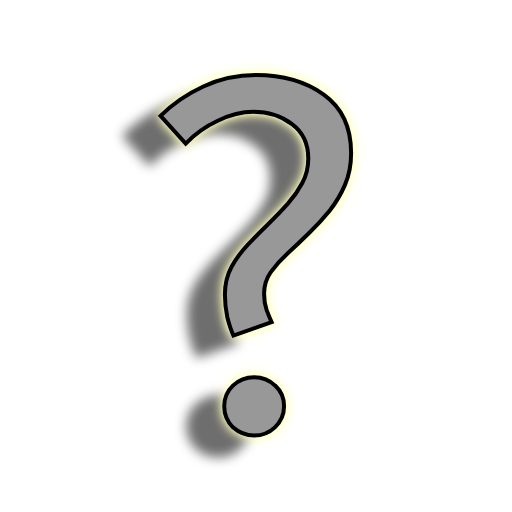
<style>
.page{position:relative;width:512px;height:512px;background:#ffffff}
.page>*{position:absolute;margin:0}
.t1{font:500px "SegoeUIVariable-RegularSmall";color:#989898}
</style>
<div class="page">
<p class="t1" style="left:156px;top:71px;width:200px;height:369px">?</p>
</div>
